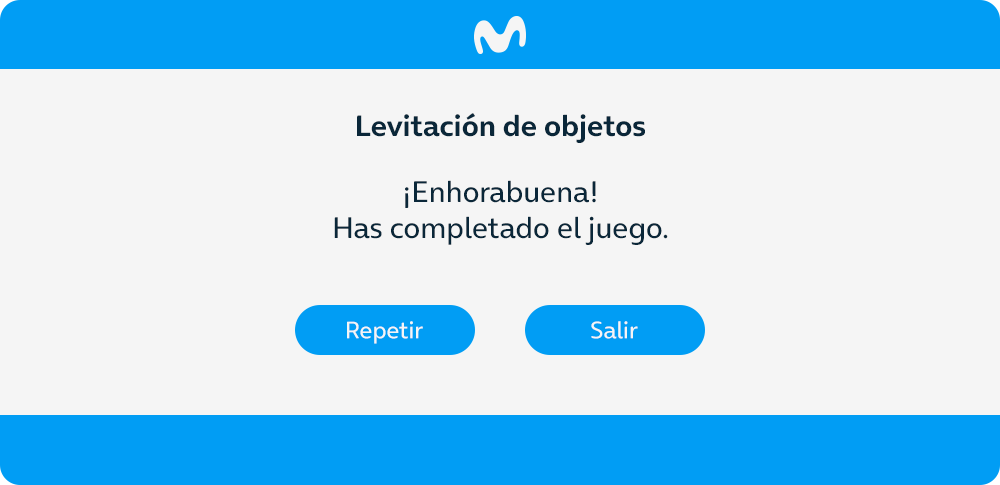
<style>
.page{position:relative;width:1000px;height:485px;background:#f5f5f5}
.page>*{position:absolute;margin:0}
.t1{font:30px "OnAir-Bold";color:#0a2739}
.t2{font:30px "OnAir-Regular";color:#0a2739}
.t3{font:24px "OnAir-Regular";color:#f5f5f5}
</style>
<div class="page">
<p class="t1" style="left:357px;top:113px;width:288px;height:30px">Levitación de objetos</p>
<p class="t2" style="left:334px;top:180px;width:334px;height:65px;text-align:center">¡Enhorabuena!<br>Has completado el juego.</p>
<p class="t3" style="left:347px;top:321px;width:76px;height:23px">Repetir</p>
<p class="t3" style="left:591px;top:321px;width:47px;height:18px">Salir</p>
</div>
